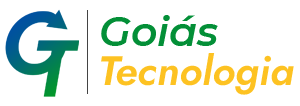
<style>
.page{position:relative;width:300px;height:106px;background:#ffffff}
.page>*{position:absolute;margin:0}
.t1{font:41px "Montserrat-SemiBoldItalic";color:#038f37}
.t2{font:41px "JostItalic-SemiBoldItalic";color:#fdc222}
</style>
<div class="page">
<p class="t1" style="left:101px;top:15px;width:117px;height:31px">Goiás</p>
<p class="t2" style="left:101px;top:53px;width:193px;height:42px">Tecnologia</p>
</div>
